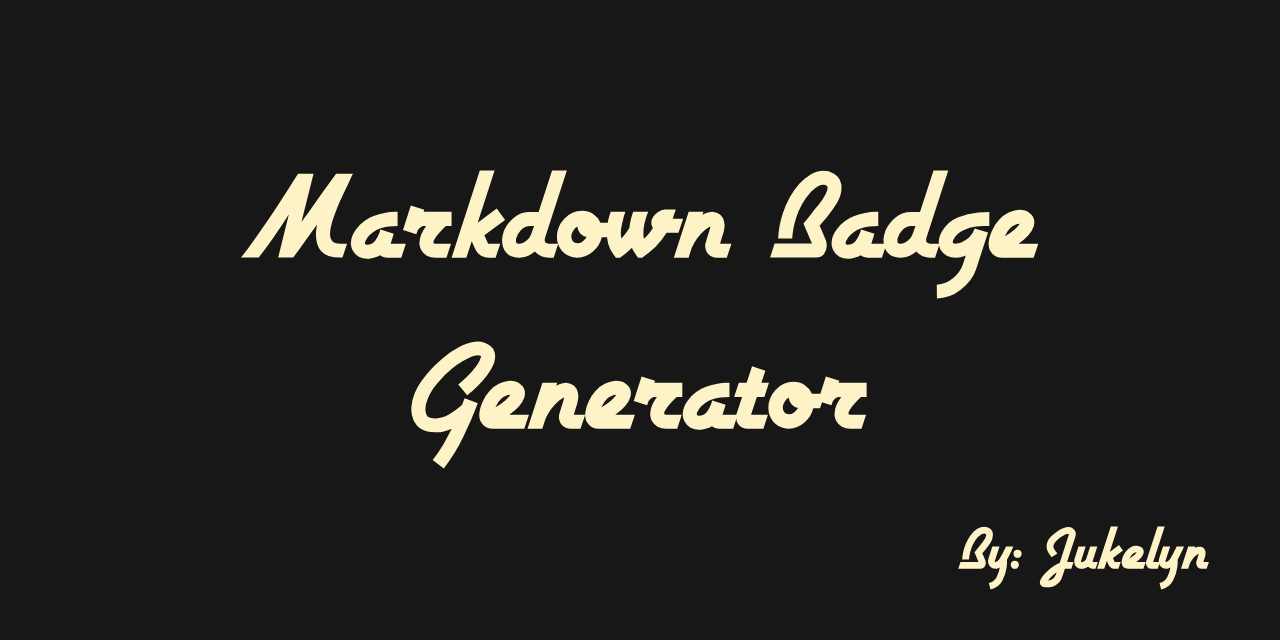
<style>
.page{position:relative;width:1280px;height:640px;background:#171717}
.page>*{position:absolute;margin:0}
.t1{font:142px "Airstream";color:#fef3c6}
.t2{font:68.8px "Airstream";color:#fef3c6}
</style>
<div class="page">
<p class="t1" style="left:240px;top:170px;width:799px;height:299px;text-align:center">Markdown Badge Generator</p>
<p class="t2" style="left:958px;top:526px;width:251px;height:64px">By: Jukelyn</p>
</div>
